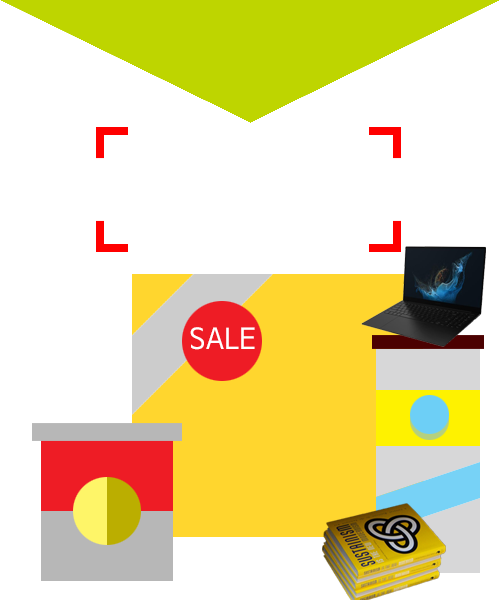
<style>
.page{position:relative;width:500px;height:600px;background:#ffffff}
.page>*{position:absolute;margin:0}
.t1{font:28.3px "NanumBarunGothic";letter-spacing:0.01em;color:#ffffff}
</style>
<div class="page">
<p class="t1" style="left:190px;top:327px;width:65px;height:23px">SALE</p>
</div>
